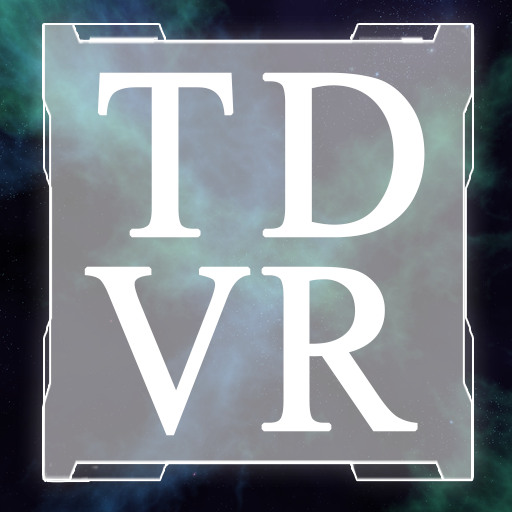
<style>
.page{position:relative;width:512px;height:512px}
.page>*{position:absolute;margin:0}
.t1{font:366.5px "AngsanaNew";letter-spacing:0.04em;color:#ffffff;font-weight:bold}
.t2{font:366.5px "AngsanaNew";color:#ffffff;font-weight:bold;scale:0.95 1}
</style>
<div class="page">
<p class="t1" style="left:97px;top:72px;width:328px;height:166px">TD</p>
<p class="t2" style="left:84px;top:266px;width:334px;height:170px">VR</p>
</div>
